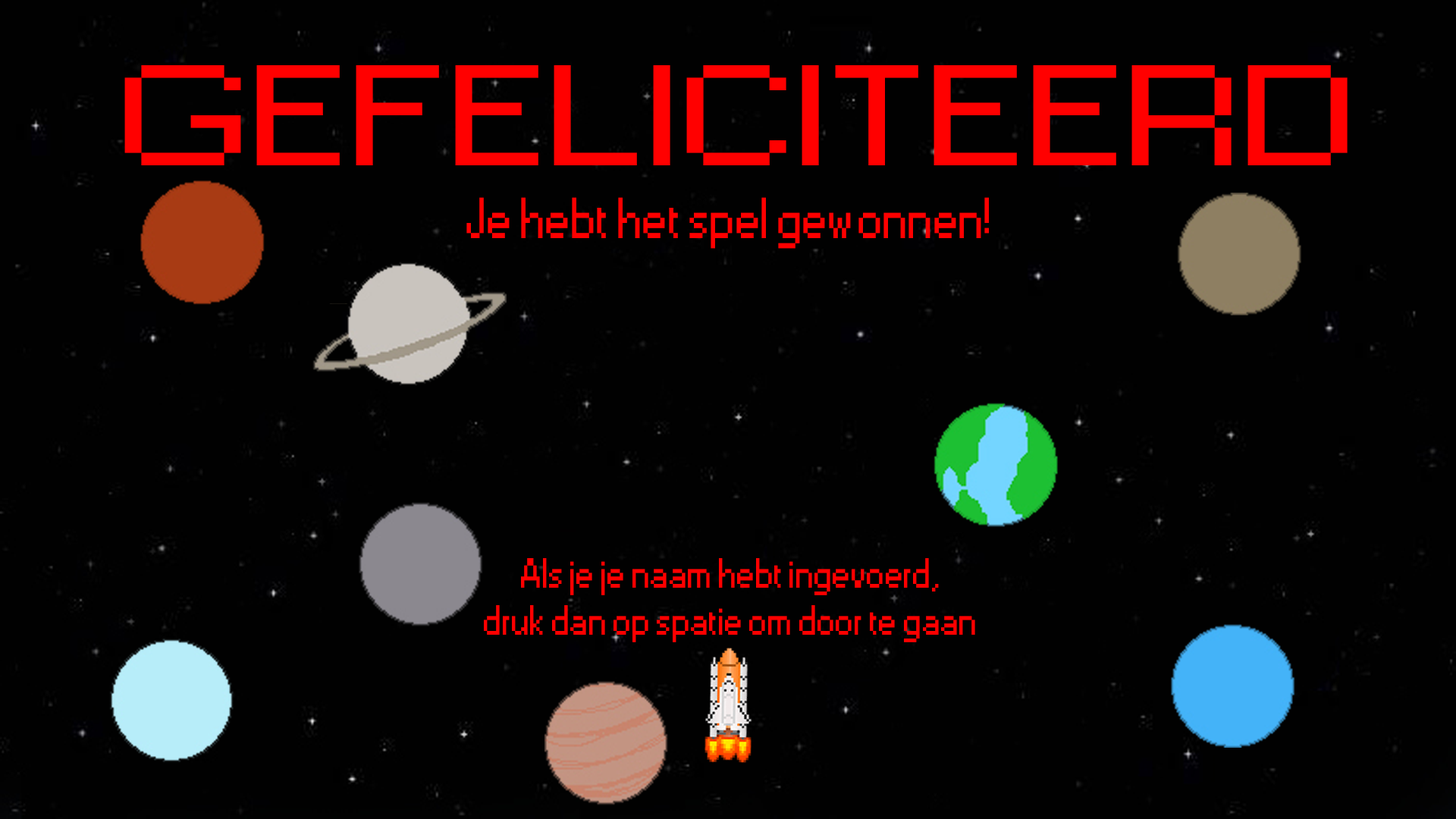
<style>
.page{position:relative;width:1456px;height:819px;background:#010101}
.page>*{position:absolute;margin:0}
.t1{font:133.4px "Small Fonts";color:#ff0000;scale:1.58 1}
.t2{font:53.9px "Small Fonts";color:#ff0000}
.t3{font:39.5px "Small Fonts";color:#ff0000}
</style>
<div class="page">
<p class="t1" style="left:124px;top:65px;width:1224px;height:100px">GEFELICITEERD</p>
<p class="t2" style="left:466px;top:197px;width:523px;height:52px">Je hebt het spel gewonnen!</p>
<p class="t3" style="left:484px;top:558px;width:491px;height:84px;text-align:center">Als je je naam hebt ingevoerd,<br>druk dan op spatie om door te gaan</p>
</div>
